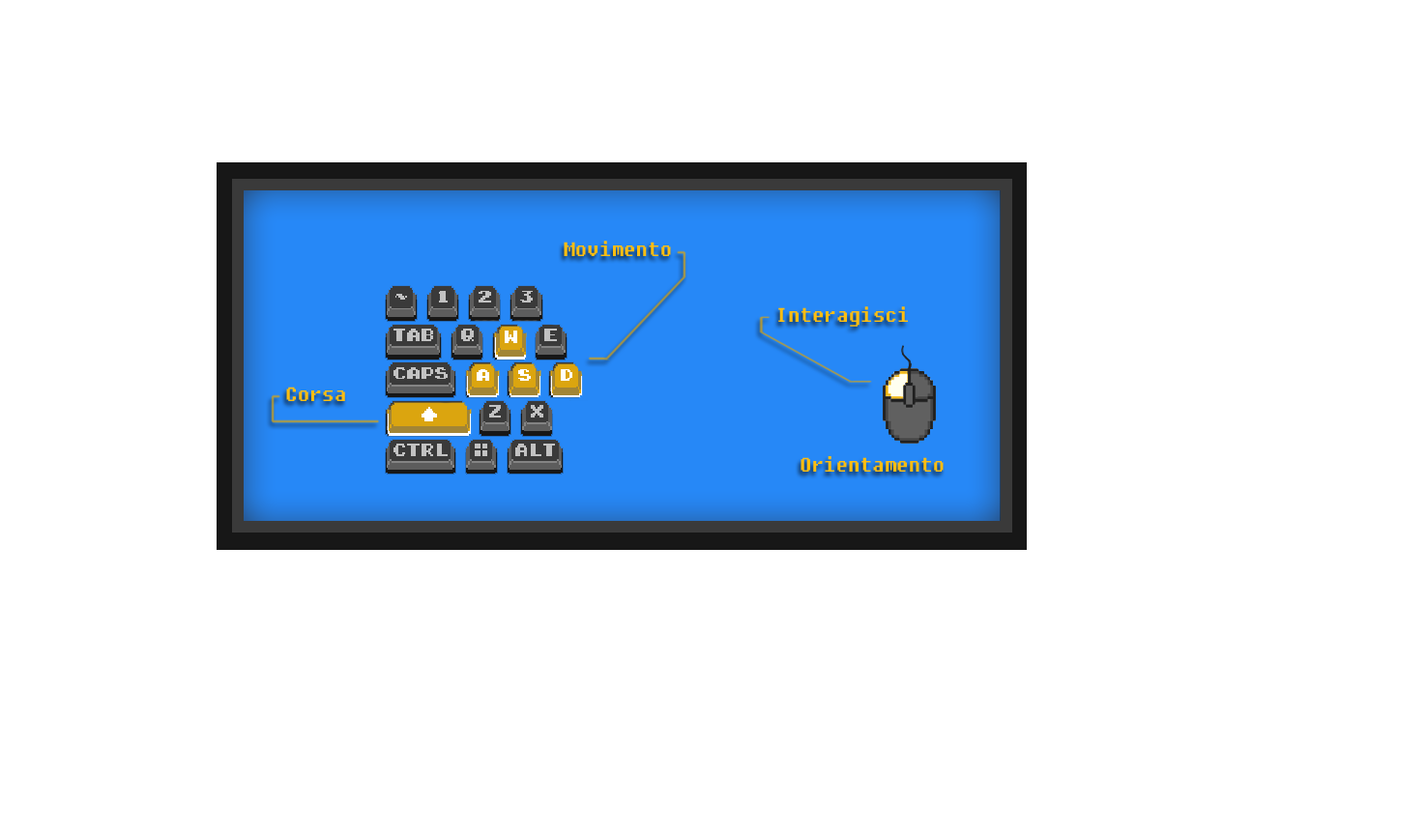
<style>
.page{position:relative;width:1427px;height:835px;background:#ffffff}
.page>*{position:absolute;margin:0}
.t1{font:19.5px "Fixedsys";color:#ffbe10}
.t2{font:19.7px "Fixedsys";color:#ffbe10}
</style>
<div class="page">
<p class="t1" style="left:564px;top:241px;width:107px;height:15px">Movimento</p>
<p class="t1" style="left:778px;top:307px;width:130px;height:20px">Interagisci</p>
<p class="t1" style="left:286px;top:387px;width:59px;height:14px">Corsa</p>
<p class="t2" style="left:801px;top:456px;width:143px;height:16px">Orientamento</p>
</div>
